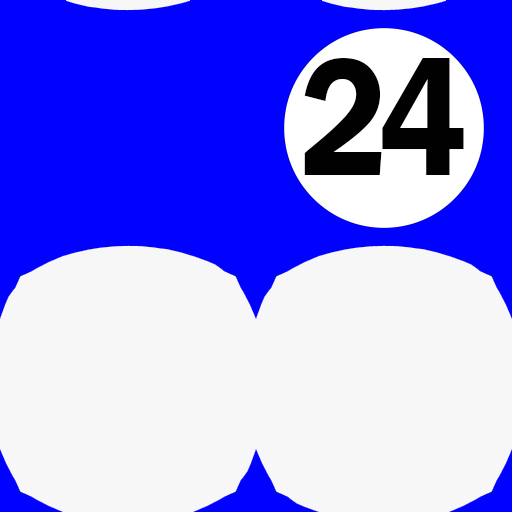
<style>
.page{position:relative;width:512px;height:512px;background:#f7f7f7}
.page>*{position:absolute;margin:0}
.t1{font:172.5px "FranklinGothic-Demi";letter-spacing:-0.05em;color:#010101;scale:0.87 1}
</style>
<div class="page">
<p class="t1" style="left:304px;top:58px;width:160px;height:117px">24</p>
</div>
